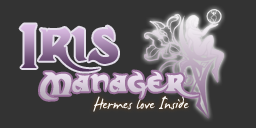
<style>
.page{position:relative;width:256px;height:128px;background:#333333}
.page>*{position:absolute;margin:0}
.t1{font:30px "DarkCrystalScript";color:#e9dced;font-weight:bold;scale:1.05 1}
.t2{font:24px "JamesFajardo";color:#efecef}
</style>
<div class="page">
<p class="t1" style="left:40px;top:71px;width:159px;height:29px">Manager</p>
<p class="t2" style="left:93px;top:96px;width:96px;height:16px">Hermes love Inside</p>
</div>
